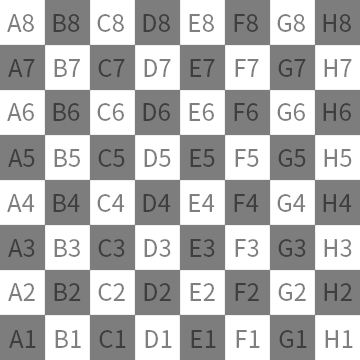
<style>
.page{position:relative;width:360px;height:360px;background:#ffffff}
.page>*{position:absolute;margin:0}
.t1{font:24px "NotoSansCJKkr-Regular";color:#7f7f7f}
.t2{font:24px "NotoSansCJKkr-Regular";color:#3e3e3e}
</style>
<div class="page">
<p class="t1" style="left:7px;top:14px;width:27px;height:18px">A8</p>
<p class="t2" style="left:53px;top:14px;width:27px;height:18px">B8</p>
<p class="t1" style="left:97px;top:14px;width:27px;height:18px">C8</p>
<p class="t2" style="left:143px;top:14px;width:27px;height:18px">D8</p>
<p class="t1" style="left:189px;top:14px;width:25px;height:18px">E8</p>
<p class="t2" style="left:234px;top:14px;width:24px;height:18px">F8</p>
<p class="t1" style="left:277px;top:14px;width:28px;height:18px">G8</p>
<p class="t2" style="left:323px;top:14px;width:28px;height:18px">H8</p>
<p class="t2" style="left:8px;top:59px;width:27px;height:18px">A7</p>
<p class="t1" style="left:54px;top:59px;width:27px;height:18px">B7</p>
<p class="t2" style="left:98px;top:59px;width:27px;height:18px">C7</p>
<p class="t1" style="left:144px;top:59px;width:27px;height:18px">D7</p>
<p class="t2" style="left:190px;top:59px;width:25px;height:18px">E7</p>
<p class="t1" style="left:235px;top:59px;width:24px;height:18px">F7</p>
<p class="t2" style="left:278px;top:59px;width:28px;height:18px">G7</p>
<p class="t1" style="left:324px;top:59px;width:28px;height:18px">H7</p>
<p class="t1" style="left:7px;top:103px;width:27px;height:18px">A6</p>
<p class="t2" style="left:53px;top:103px;width:27px;height:18px">B6</p>
<p class="t1" style="left:97px;top:103px;width:27px;height:18px">C6</p>
<p class="t2" style="left:143px;top:103px;width:27px;height:18px">D6</p>
<p class="t1" style="left:189px;top:103px;width:25px;height:18px">E6</p>
<p class="t2" style="left:234px;top:103px;width:24px;height:18px">F6</p>
<p class="t1" style="left:277px;top:103px;width:28px;height:18px">G6</p>
<p class="t2" style="left:323px;top:103px;width:28px;height:18px">H6</p>
<p class="t2" style="left:8px;top:149px;width:27px;height:18px">A5</p>
<p class="t1" style="left:54px;top:149px;width:26px;height:18px">B5</p>
<p class="t2" style="left:98px;top:149px;width:27px;height:18px">C5</p>
<p class="t1" style="left:144px;top:149px;width:27px;height:18px">D5</p>
<p class="t2" style="left:190px;top:149px;width:25px;height:18px">E5</p>
<p class="t1" style="left:235px;top:149px;width:24px;height:18px">F5</p>
<p class="t2" style="left:278px;top:149px;width:28px;height:18px">G5</p>
<p class="t1" style="left:324px;top:149px;width:28px;height:18px">H5</p>
<p class="t1" style="left:7px;top:194px;width:28px;height:18px">A4</p>
<p class="t2" style="left:53px;top:194px;width:27px;height:18px">B4</p>
<p class="t1" style="left:97px;top:194px;width:28px;height:18px">C4</p>
<p class="t2" style="left:143px;top:194px;width:28px;height:18px">D4</p>
<p class="t1" style="left:189px;top:194px;width:26px;height:18px">E4</p>
<p class="t2" style="left:234px;top:194px;width:25px;height:18px">F4</p>
<p class="t1" style="left:277px;top:194px;width:29px;height:18px">G4</p>
<p class="t2" style="left:323px;top:194px;width:29px;height:18px">H4</p>
<p class="t2" style="left:8px;top:239px;width:27px;height:18px">A3</p>
<p class="t1" style="left:54px;top:239px;width:26px;height:18px">B3</p>
<p class="t2" style="left:98px;top:239px;width:27px;height:18px">C3</p>
<p class="t1" style="left:144px;top:239px;width:27px;height:18px">D3</p>
<p class="t2" style="left:190px;top:239px;width:25px;height:18px">E3</p>
<p class="t1" style="left:235px;top:239px;width:24px;height:18px">F3</p>
<p class="t2" style="left:278px;top:239px;width:28px;height:18px">G3</p>
<p class="t1" style="left:324px;top:239px;width:28px;height:18px">H3</p>
<p class="t1" style="left:8px;top:283px;width:27px;height:18px">A2</p>
<p class="t2" style="left:54px;top:283px;width:27px;height:18px">B2</p>
<p class="t1" style="left:98px;top:283px;width:27px;height:18px">C2</p>
<p class="t2" style="left:144px;top:283px;width:27px;height:18px">D2</p>
<p class="t1" style="left:190px;top:283px;width:25px;height:18px">E2</p>
<p class="t2" style="left:235px;top:283px;width:24px;height:18px">F2</p>
<p class="t1" style="left:278px;top:283px;width:28px;height:18px">G2</p>
<p class="t2" style="left:324px;top:283px;width:28px;height:18px">H2</p>
<p class="t2" style="left:9px;top:330px;width:27px;height:18px">A1</p>
<p class="t1" style="left:55px;top:330px;width:26px;height:18px">B1</p>
<p class="t2" style="left:99px;top:330px;width:27px;height:18px">C1</p>
<p class="t1" style="left:145px;top:330px;width:27px;height:18px">D1</p>
<p class="t2" style="left:191px;top:330px;width:25px;height:18px">E1</p>
<p class="t1" style="left:236px;top:330px;width:24px;height:18px">F1</p>
<p class="t2" style="left:279px;top:330px;width:28px;height:18px">G1</p>
<p class="t1" style="left:325px;top:330px;width:28px;height:18px">H1</p>
</div>
